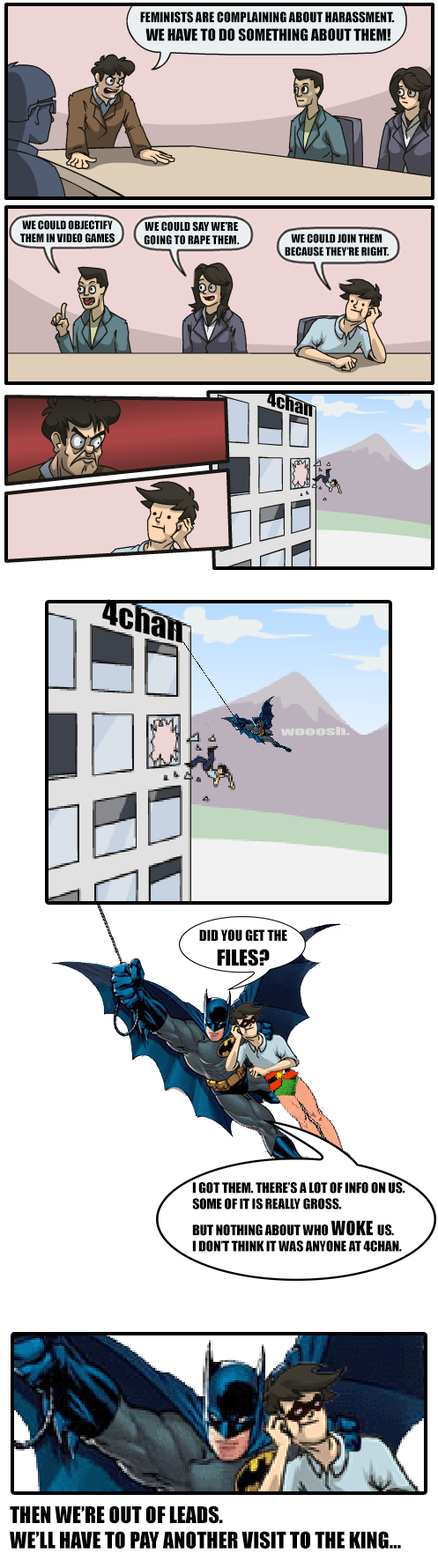
<style>
.page{position:relative;width:438px;height:1568px;background:#ffffff}
.page>*{position:absolute;margin:0}
.t1{font:9.7px "Impact";color:#000000}
.t2{font:15.4px "Impact";color:#000000}
.t3{font:8.1px "Impact";color:#000000}
.t4{font:8.4px "Impact";color:#000000}
.t5{font:8.2px "Impact";color:#000000}
.t6{font:17.9px "Impact";color:#000000;scale:1.03 1}
.t7{font:31.3px "Impact";color:#000000;scale:1.05 1}
.t8{font:10.5px "Impact";color:#dbdbdb;scale:1.93 1}
.t9{font:10.4px "Impact";color:#000000}
.t10{font:20.7px "Impact";color:#000000}
.t11{font:13.4px "Impact";color:#000000}
.t12{font:18.2px "Impact";color:#000000}
.t13{font:21.1px "Impact";color:#000000}
</style>
<div class="page">
<p class="t1" style="left:140px;top:11px;width:255px;height:30px;text-align:center">FEMINISTS ARE COMPLAINING ABOUT HARASSMENT. <br><span class="t2">WE HAVE TO DO SOMETHING ABOUT THEM!</span></p>
<p class="t3" style="left:20px;top:220px;width:95px;height:23px;text-align:center">WE COULD OBJECTIFY<br>THEM IN VIDEO GAMES</p>
<p class="t4" style="left:144px;top:221px;width:96px;height:24px;text-align:center">WE COULD SAY WE’RE<br>GOING TO RAPE THEM.</p>
<p class="t5" style="left:285px;top:233px;width:103px;height:23px;text-align:center">WE COULD JOIN THEM<br>BECAUSE THEY’RE RIGHT.</p>
<p class="t6" style="left:267px;top:392px;width:46px;height:26px;rotate:15deg">4chan</p>
<p class="t7" style="left:102px;top:599px;width:80px;height:44px;rotate:14deg">4chan</p>
<p class="t8" style="left:280px;top:727px;width:70px;height:9px;rotate:-1deg">wooosh.</p>
<p class="t9" style="left:199px;top:929px;width:88px;height:37px;text-align:center">DID YOU GET THE<br><span class="t10">FILES?</span></p>
<p class="t11" style="left:192px;top:1182px;width:213px;height:70px">I GOT THEM. THERE’S A LOT OF INFO ON US.<br>SOME OF IT IS REALLY GROSS.<br>BUT NOTHING ABOUT WHO <span class="t12">WOKE </span>US.<br>I DON’T THINK IT WAS ANYONE AT 4CHAN.</p>
<p class="t13" style="left:10px;top:1505px;width:391px;height:44px">THEN WE’RE OUT OF LEADS.<br>WE’LL HAVE TO PAY ANOTHER VISIT TO THE KING...</p>
</div>
